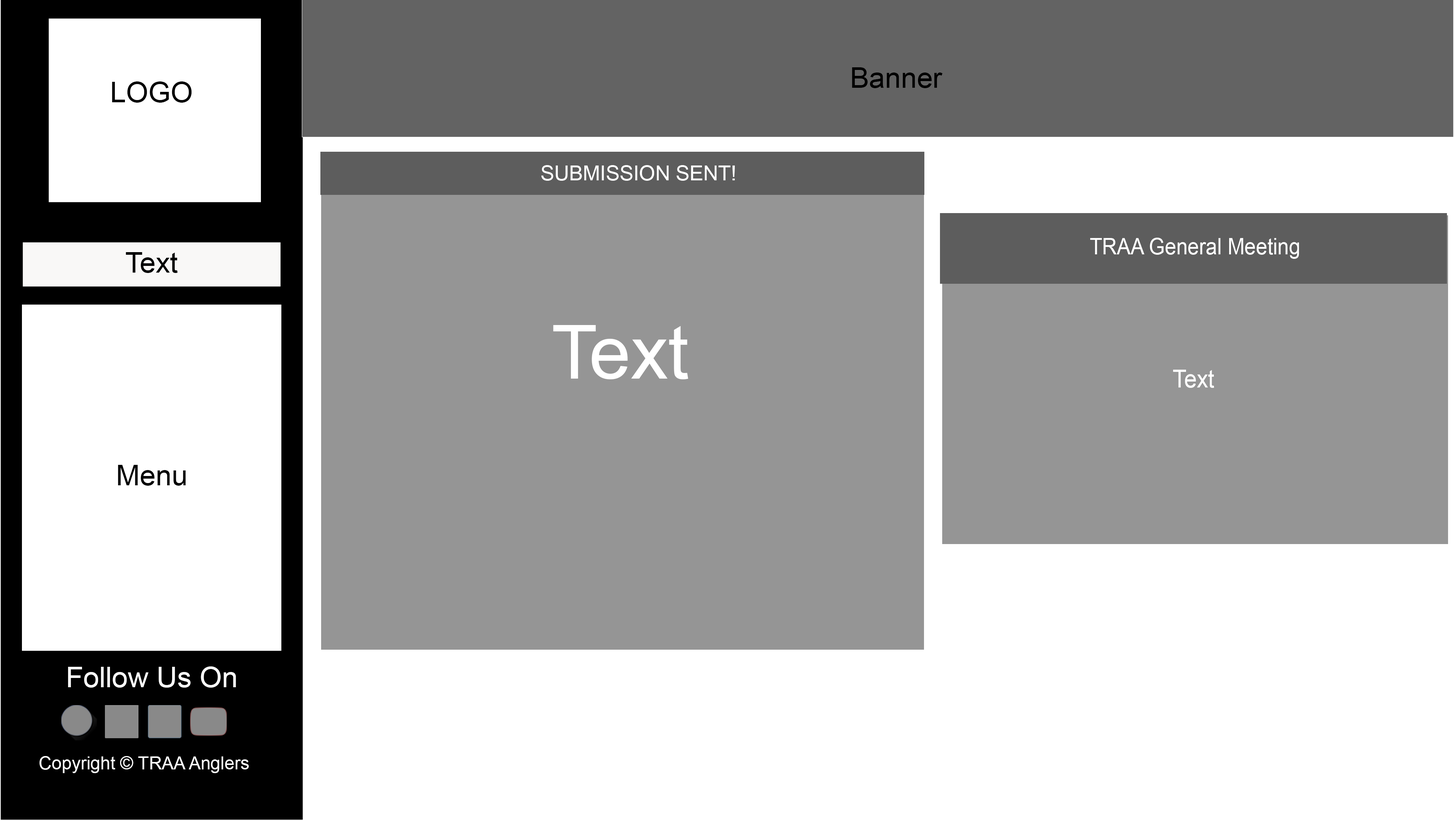
<style>
.page{position:relative;width:1454px;height:820px;background:#ffffff}
.page>*{position:absolute;margin:0}
.t1{font:28.7px "ArialMT";color:#000000}
.t2{font:20.6px "ArialMT";color:#ffffff}
.t3{font:22.5px "ArialMT";color:#ffffff;scale:0.91 1}
.t4{font:74.8px "ArialMT";color:#ffffff}
.t5{font:25px "ArialMT";color:#ffffff;scale:0.91 1}
.t6{font:28.7px "ArialMT";color:#ffffff}
.t7{font:17.9px "ArialMT";color:#ffffff}
</style>
<div class="page">
<p class="t1" style="left:852px;top:67px;width:91px;height:21px">Banner</p>
<p class="t1" style="left:112px;top:81px;width:80px;height:22px">LOGO</p>
<p class="t2" style="left:541px;top:165px;width:194px;height:16px">SUBMISSION SENT!</p>
<p class="t3" style="left:1090px;top:238px;width:209px;height:21px">TRAA General Meeting</p>
<p class="t1" style="left:126px;top:252px;width:52px;height:21px">Text</p>
<p class="t4" style="left:553px;top:325px;width:136px;height:54px">Text</p>
<p class="t5" style="left:1173px;top:370px;width:42px;height:18px">Text</p>
<p class="t1" style="left:118px;top:465px;width:68px;height:21px">Menu</p>
<p class="t6" style="left:68px;top:666px;width:168px;height:21px">Follow Us On</p>
<p class="t7" style="left:39px;top:756px;width:210px;height:17px">Copyright © TRAA Anglers</p>
</div>
